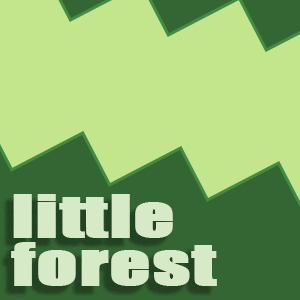
<style>
.page{position:relative;width:300px;height:300px;background:#c3e68c}
.page>*{position:absolute;margin:0}
.t1{font:54px/48px "Impact";letter-spacing:0.01em;color:#d7eac7;font-weight:bold;scale:1.44 1}
</style>
<div class="page">
<p class="t1" style="left:11px;top:194px;width:206px;height:92px">little<br>forest</p>
</div>
